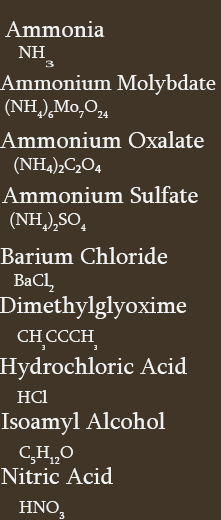
<style>
.page{position:relative;width:221px;height:520px;background:#413527}
.page>*{position:absolute;margin:0}
.t1{font:24px "Sylfaen";color:#f1f3f2}
.t2{font:18px "Sylfaen";color:#f1f3f2}
.t3{font:9px "Sylfaen";color:#f1f1f1;scale:2 1}
.t4{font:22px "Sylfaen";color:#f1f3f2}
.t5{font:18px "MyriadPro-Regular";color:#f1f3f2}
</style>
<div class="page">
<p class="t1" style="left:5px;top:21px;width:100px;height:47px">Ammonia <span class="t2"><br>   NH</span><span class="t3">3</span></p>
<p class="t4" style="left:0px;top:74px;width:216px;height:44px">Ammonium Molybdate <br><span class="t2"> (NH4)6Mo7O24</span></p>
<p class="t1" style="left:0px;top:131px;width:204px;height:43px">Ammonium Oxalate<span class="t2">  <br>   (NH</span><span class="t5">₄</span><span class="t2">)</span><span class="t5">₂</span><span class="t2">C</span><span class="t5">₂</span><span class="t2">O</span><span class="t5">₄</span></p>
<p class="t1" style="left:2px;top:186px;width:196px;height:45px">Ammonium Sulfate<br><span class="t2">   (NH4)2SO4</span></p>
<p class="t1" style="left:0px;top:247px;width:168px;height:45px">Barium Chloride<br><span class="t2">   BaCl2</span></p>
<p class="t1" style="left:0px;top:296px;width:187px;height:54px">Dimethylglyoxime<br>   <span class="t2">CH</span><span class="t5">₃</span><span class="t2">CCCH</span><span class="t5">₃</span></p>
<p class="t1" style="left:0px;top:357px;width:187px;height:46px">Hydrochloric Acid<br>   <span class="t2">HCl</span></p>
<p class="t1" style="left:1px;top:412px;width:165px;height:52px">Isoamyl Alcohol<br>   <span class="t2">C5H12O</span></p>
<p class="t1" style="left:1px;top:467px;width:112px;height:52px">Nitric Acid<br>   <span class="t2">HNO3</span></p>
</div>
